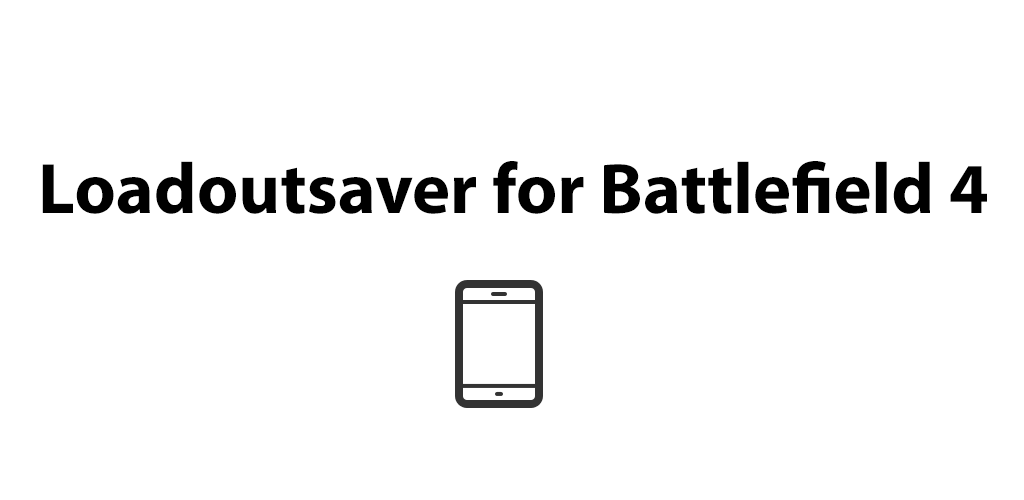
<style>
.page{position:relative;width:1024px;height:500px;background:#ffffff}
.page>*{position:absolute;margin:0}
.t1{font:72px "MyriadPro-Bold";color:#000000}
</style>
<div class="page">
<p class="t1" style="left:42px;top:161px;width:945px;height:53px">Loadoutsaver for Battlefield 4</p>
</div>
